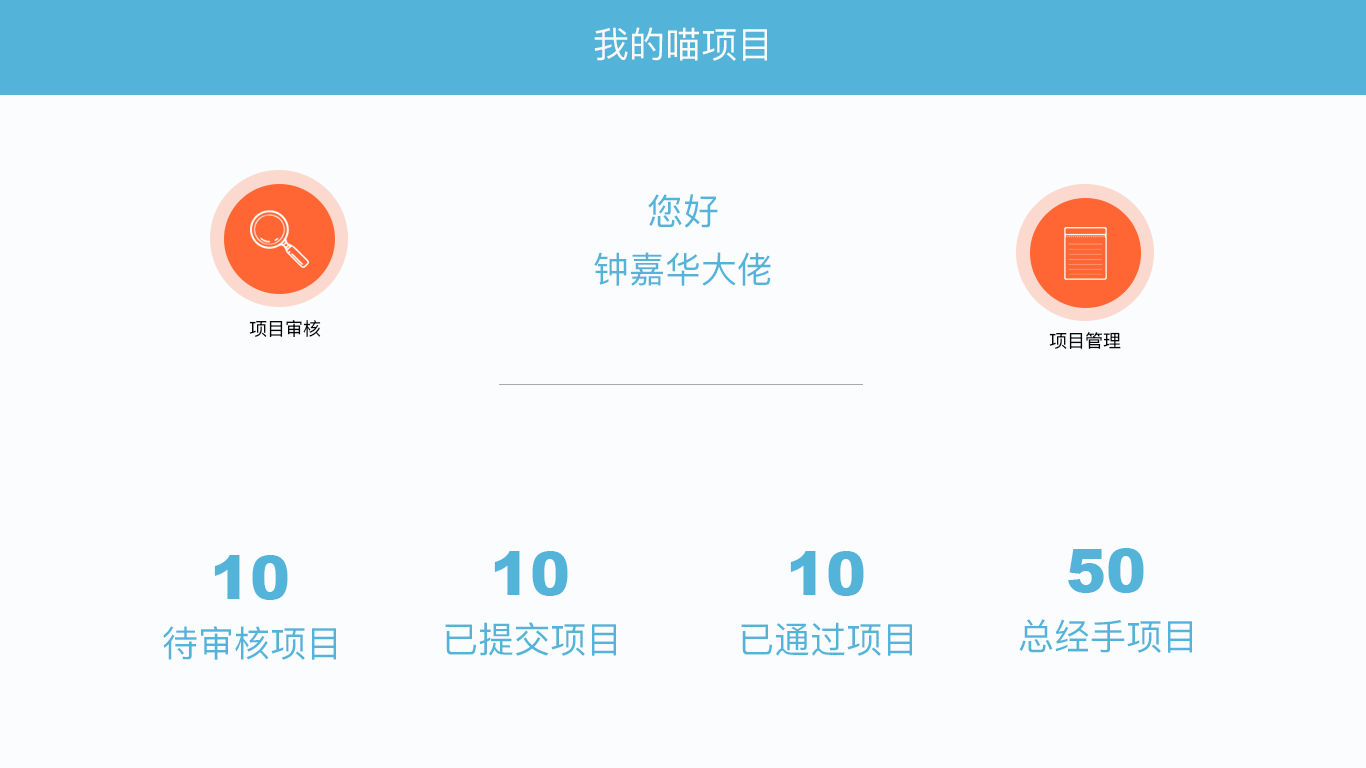
<style>
.page{position:relative;width:1366px;height:768px;background:#fafcfd}
.page>*{position:absolute;margin:0}
.t1{font:36px "PingFangSC-Regular";color:#f9fafa}
.t2{font:36px "PingFangSC-Regular";color:#54b3d9}
.t3{font:18px "PingFangSC-Regular";color:#060606}
.t4{font:60px "Arial-Black";color:#54b3d9}
</style>
<div class="page">
<p class="t1" style="left:594px;top:27px;width:173px;height:34px">我的喵项目</p>
<p class="t2" style="left:648px;top:194px;width:70px;height:34px">您好</p>
<p class="t2" style="left:594px;top:252px;width:177px;height:34px">钟嘉华大佬</p>
<p class="t3" style="left:249px;top:320px;width:72px;height:17px">项目审核</p>
<p class="t3" style="left:1049px;top:332px;width:72px;height:17px">项目管理</p>
<p class="t4" style="left:214px;top:555px;width:74px;height:45px">10</p>
<p class="t4" style="left:494px;top:551px;width:74px;height:45px">10</p>
<p class="t4" style="left:790px;top:551px;width:74px;height:45px">10</p>
<p class="t4" style="left:1068px;top:548px;width:76px;height:45px">50</p>
<p class="t2" style="left:163px;top:626px;width:173px;height:34px">待审核项目</p>
<p class="t2" style="left:445px;top:622px;width:171px;height:34px">已提交项目</p>
<p class="t2" style="left:741px;top:622px;width:171px;height:34px">已通过项目</p>
<p class="t2" style="left:1019px;top:619px;width:173px;height:34px">总经手项目</p>
</div>
